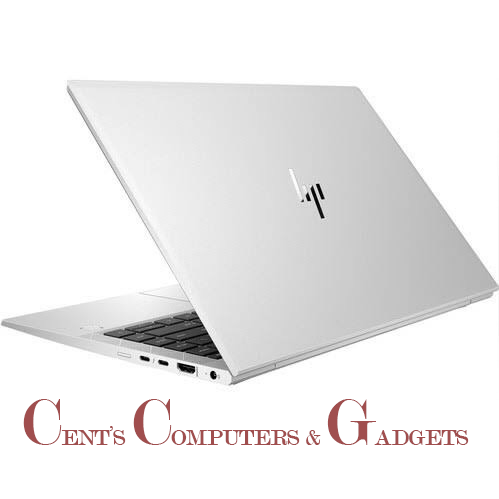
<style>
.page{position:relative;width:499px;height:499px;background:#ffffff}
.page>*{position:absolute;margin:0}
.t1{font:24px "Modern-Regular";color:#a04e4e}
.t2{font:72px "Modern-Regular";color:#a04e4e}
</style>
<div class="page">
<p class="t1" style="left:23px;top:399px;width:446px;height:46px"><span class="t2">C</span>ENT’S <span class="t2">C</span>OMPUTERS &amp; <span class="t2">G</span>ADGETS</p>
</div>
